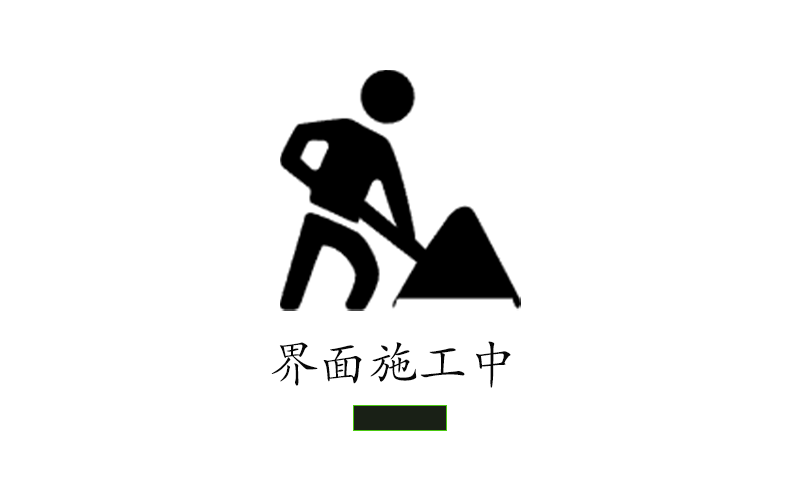
<style>
.page{position:relative;width:800px;height:480px;background:#ffffff}
.page>*{position:absolute;margin:0}
.t1{font:50px "STKaiti";color:#070707}
</style>
<div class="page">
<p class="t1" style="left:271px;top:341px;width:240px;height:47px">界面施工中</p>
</div>
